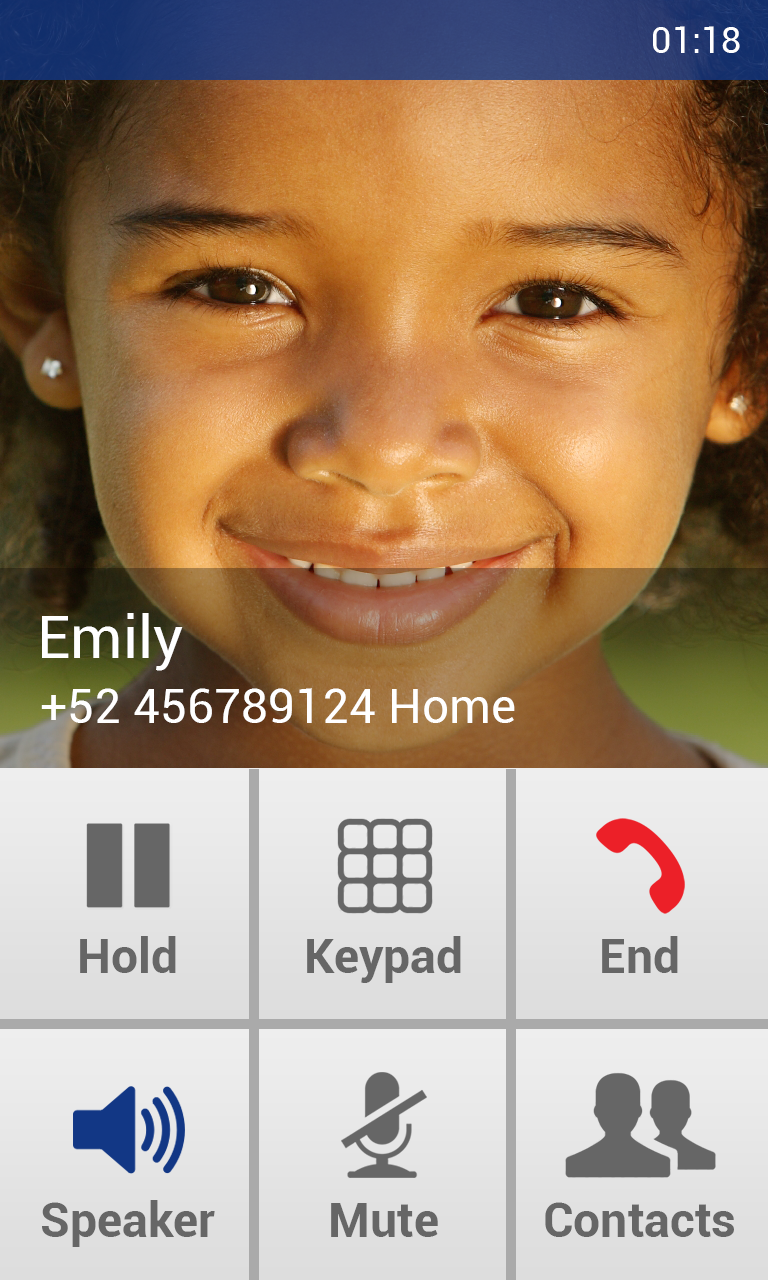
<style>
.page{position:relative;width:768px;height:1280px}
.page>*{position:absolute;margin:0}
.t1{font:36px "Roboto-Regular";color:#ffffff}
.t2{font:60px "Roboto-Regular";color:#ffffff}
.t3{font:48px "Roboto-Regular";color:#ffffff}
.t4{font:48px "Roboto-Bold";color:#666666}
</style>
<div class="page">
<p class="t1" style="left:653px;top:26px;width:87px;height:27px">01:18</p>
<p class="t2" style="left:42px;top:613px;width:141px;height:58px">Emily</p>
<p class="t3" style="left:41px;top:688px;width:474px;height:35px">+52 456789124 Home</p>
<p class="t4" style="left:80px;top:936px;width:96px;height:37px">Hold</p>
<p class="t4" style="left:307px;top:936px;width:154px;height:47px">Keypad</p>
<p class="t4" style="left:602px;top:936px;width:76px;height:37px">End</p>
<p class="t4" style="left:42px;top:1200px;width:173px;height:47px">Speaker</p>
<p class="t4" style="left:331px;top:1203px;width:107px;height:34px">Mute</p>
<p class="t4" style="left:545px;top:1202px;width:189px;height:35px">Contacts</p>
</div>
